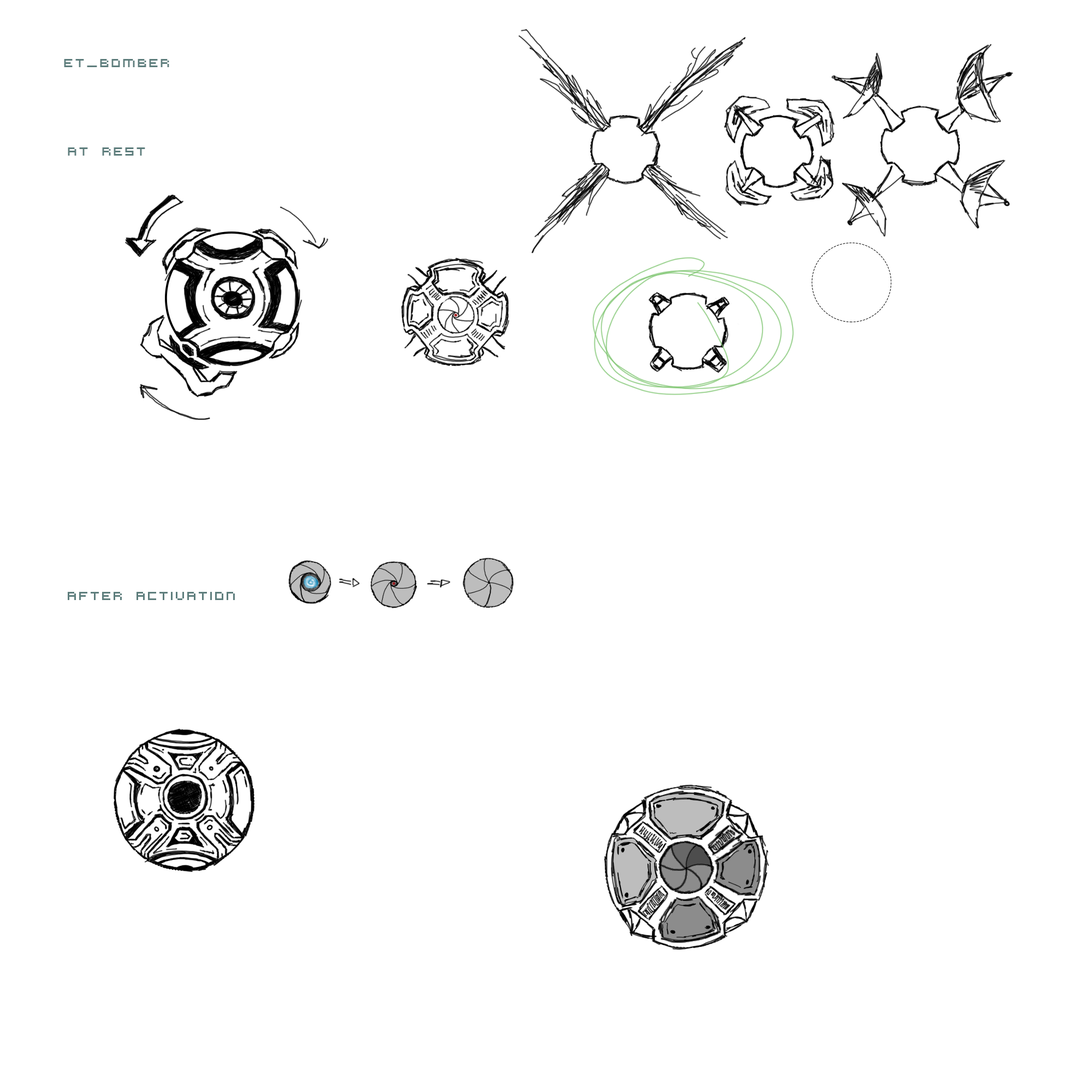
<style>
.page{position:relative;width:1092px;height:1092px;background:#ffffff}
.page>*{position:absolute;margin:0}
.t1{font:13.1px "VirtualDJ";color:#5e7e7d}
</style>
<div class="page">
<p class="t1" style="left:64px;top:59px;width:105px;height:8px">et_bomber</p>
<p class="t1" style="left:68px;top:147px;width:77px;height:9px">at rest</p>
<p class="t1" style="left:68px;top:592px;width:167px;height:8px">after activation</p>
</div>
